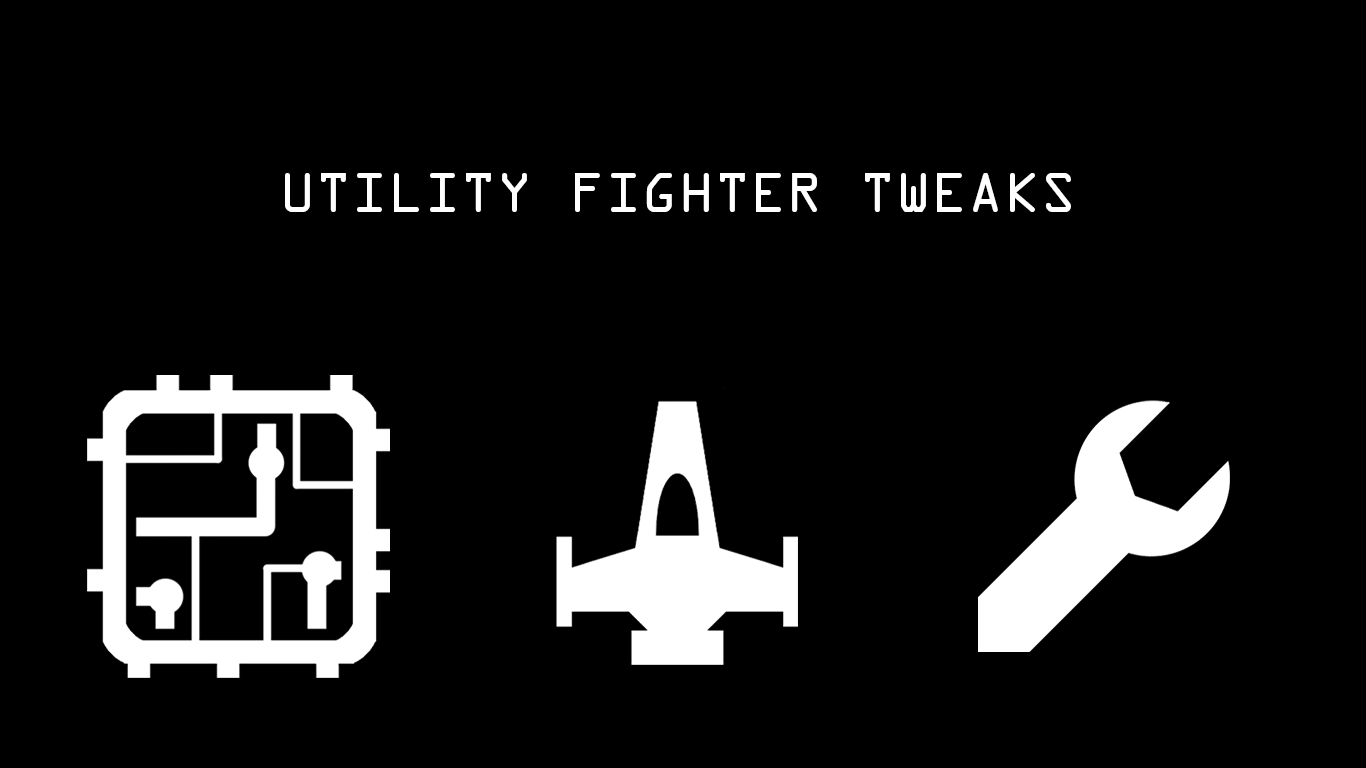
<style>
.page{position:relative;width:1366px;height:768px;background:#000000}
.page>*{position:absolute;margin:0}
.t1{font:60px "OCRAExtended";color:#ffffff}
</style>
<div class="page">
<p class="t1" style="left:285px;top:173px;width:786px;height:39px">UTILITY FIGHTER TWEAKS</p>
</div>
